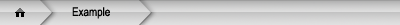
<style>
.page{position:relative;width:400px;height:25px}
.page>*{position:absolute;margin:0}
.t1{font:12px "ArialNarrow";color:#000000}
</style>
<div class="page">
<p class="t1" style="left:72px;top:7px;width:38px;height:12px">Example</p>
</div>
